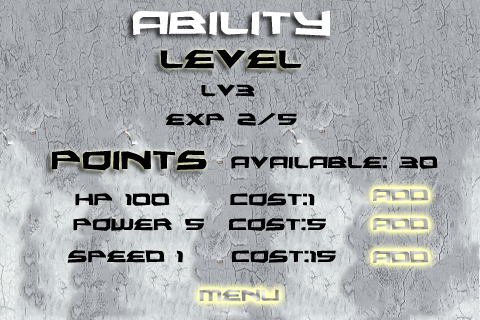
<style>
.page{position:relative;width:480px;height:320px}
.page>*{position:absolute;margin:0}
.t1{font:60px "AlexisGrunge";color:#ffffff}
.t2{font:48px "AlexisGrunge";color:#000000}
.t3{font:30px "AlexisGrunge";color:#000000}
</style>
<div class="page">
<p class="t1" style="left:132px;top:10px;width:198px;height:26px">ability</p>
<p class="t2" style="left:160px;top:49px;width:142px;height:21px">level</p>
<p class="t3" style="left:201px;top:84px;width:54px;height:13px">lv3</p>
<p class="t3" style="left:165px;top:113px;width:132px;height:13px">exp 2/5</p>
<p class="t2" style="left:51px;top:150px;width:156px;height:21px">points</p>
<p class="t3" style="left:231px;top:156px;width:207px;height:13px">available: 30</p>
<p class="t3" style="left:75px;top:193px;width:240px;height:13px">hp 100     cost:1</p>
<p class="t3" style="left:73px;top:218px;width:253px;height:13px">power 5  cost:5</p>
<p class="t3" style="left:67px;top:250px;width:269px;height:13px">speed 1    cost:15</p>
</div>
